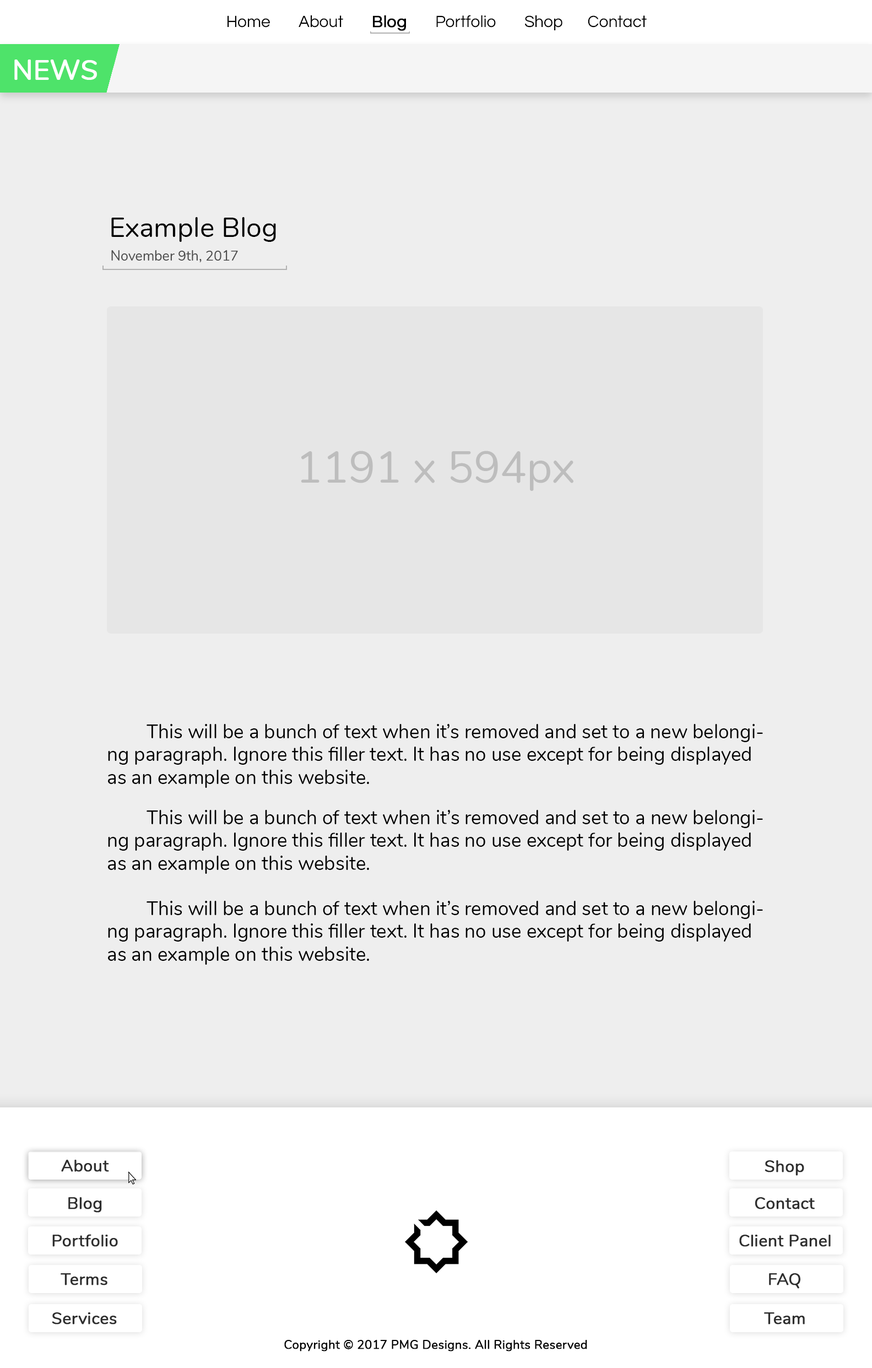
<style>
.page{position:relative;width:872px;height:1368px;background:#eeeeee}
.page>*{position:absolute;margin:0}
.t1{font:16.8px "Questrial-Regular";color:#000000}
.t2{font:16.8px "Questrial-Regular";color:#000000;font-weight:bold}
.t3{font:27.4px "Nunito-Regular";color:#ffffff;font-weight:bold}
.t4{font:27.5px "Nunito-Regular";color:#000000}
.t5{font:13.8px "Nunito-Regular";color:#4a4a4a}
.t6{font:44px "Nunito-Regular";color:#bdbdbd}
.t7{font:19.2px "Nunito-Regular";color:#000000}
.t8{font:27.5px "Nunito-Regular";color:#3e3e3e}
.t9{font:16.5px "Nunito-Regular";color:#2e2e2e;font-weight:bold}
.t10{font:12.2px "Nunito-Regular";color:#000000;font-weight:bold}
</style>
<div class="page">
<p class="t1" style="left:227px;top:15px;width:420px;height:16px">Home        About        <span class="t2">Blog</span>        Portfolio        Shop       Contact</p>
<p class="t3" style="left:14px;top:59px;width:83px;height:21px">NEWS</p>
<p class="t4" style="left:111px;top:217px;width:165px;height:25px">Example Blog</p>
<p class="t5" style="left:111px;top:250px;width:127px;height:12px">November 9th, 2017</p>
<p class="t6" style="left:301px;top:451px;width:272px;height:40px">1191 x 594px</p>
<p class="t7" style="left:108px;top:724px;width:655px;height:64px"><span class="t8">  </span>This will be a bunch of text when it’s removed and set to a new belongi-<br>ng paragraph. Ignore this filler text. It has no use except for being displayed <br>as an example on this website.</p>
<p class="t7" style="left:108px;top:810px;width:655px;height:64px"><span class="t8">  </span>This will be a bunch of text when it’s removed and set to a new belongi-<br>ng paragraph. Ignore this filler text. It has no use except for being displayed <br>as an example on this website.</p>
<p class="t7" style="left:108px;top:901px;width:655px;height:63px"><span class="t8">  </span>This will be a bunch of text when it’s removed and set to a new belongi-<br>ng paragraph. Ignore this filler text. It has no use except for being displayed <br>as an example on this website.</p>
<p class="t9" style="left:61px;top:1159px;width:48px;height:13px">About</p>
<p class="t9" style="left:765px;top:1160px;width:39px;height:15px">Shop</p>
<p class="t9" style="left:68px;top:1197px;width:34px;height:15px">Blog</p>
<p class="t9" style="left:755px;top:1197px;width:60px;height:12px">Contact</p>
<p class="t9" style="left:52px;top:1234px;width:66px;height:12px">Portfolio</p>
<p class="t9" style="left:739px;top:1234px;width:92px;height:12px">Client Panel</p>
<p class="t9" style="left:61px;top:1273px;width:46px;height:12px">Terms</p>
<p class="t9" style="left:769px;top:1273px;width:31px;height:15px">FAQ</p>
<p class="t9" style="left:52px;top:1312px;width:65px;height:12px">Services</p>
<p class="t9" style="left:764px;top:1312px;width:41px;height:12px">Team</p>
<p class="t10" style="left:284px;top:1340px;width:303px;height:11px">Copyright © 2017 PMG Designs. All Rights Reserved</p>
</div>
